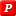
<style>
.page{position:relative;width:16px;height:16px}
.page>*{position:absolute;margin:0}
.t1{font:12px "BookmanOldStyle-BoldItalic";color:#ffffff}
</style>
<div class="page">
<p class="t1" style="left:3px;top:4px;width:10px;height:8px">P</p>
</div>
